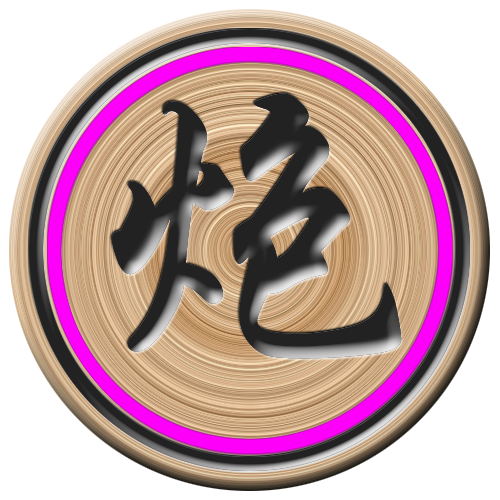
<style>
.page{position:relative;width:500px;height:500px;background:#ffffff}
.page>*{position:absolute;margin:0}
.t1{font:360px "STXingkai"}
</style>
<div class="page">
<p class="t1" style="left:111px;top:93px;width:291px;height:266px">炮</p>
</div>
